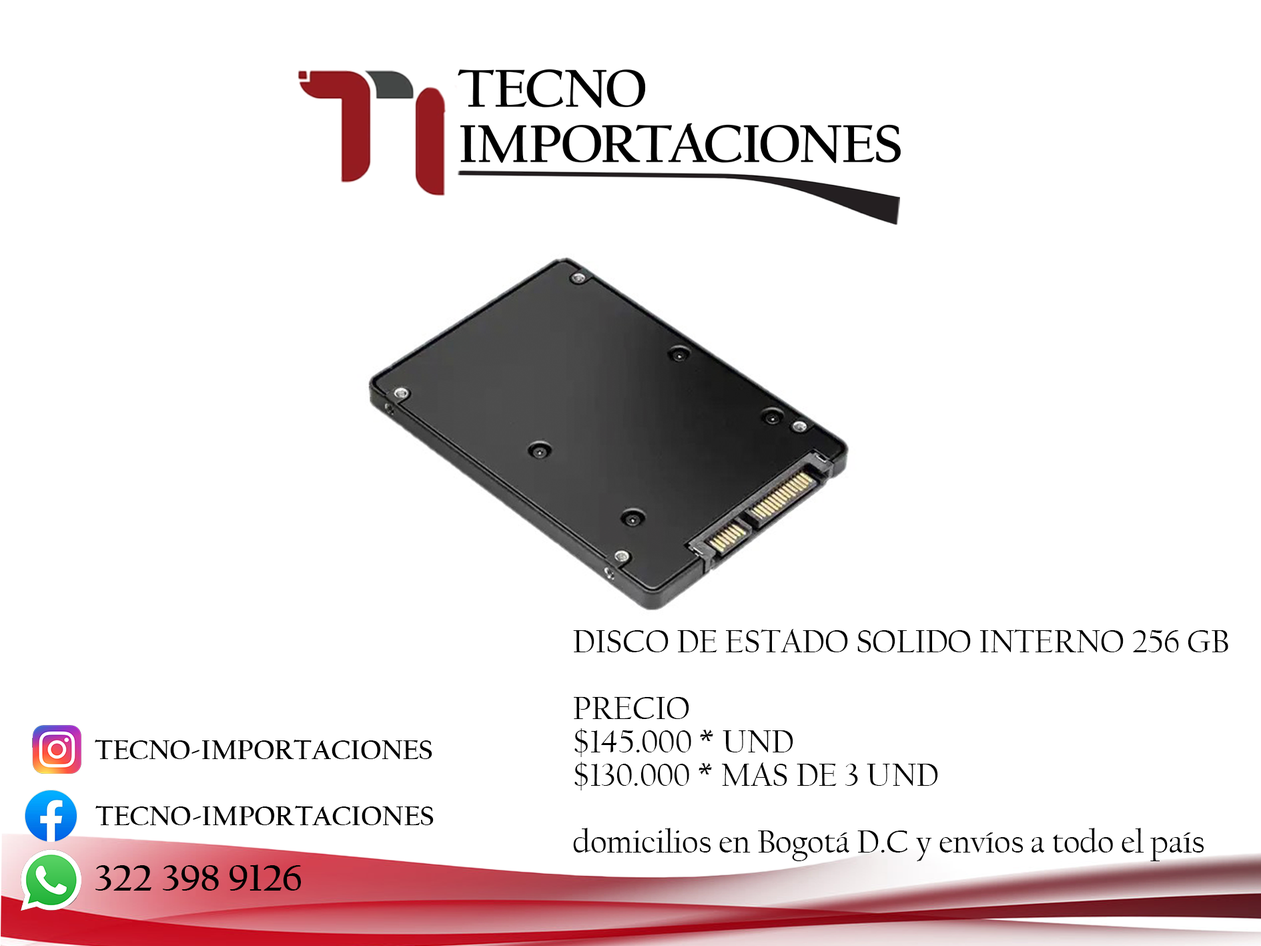
<style>
.page{position:relative;width:1261px;height:946px;background:#ffffff}
.page>*{position:absolute;margin:0}
.t1{font:33.4px/33.4px "CalifornianFB-Reg";letter-spacing:-0.005em;color:#000000}
.t2{font:27.8px "CalifornianFB-Bold";letter-spacing:-0.005em;color:#000000}
.t3{font:38.9px "CalifornianFB-Bold";letter-spacing:-0.005em;color:#000000}
</style>
<div class="page">
<p class="t1" style="left:573px;top:629px;width:655px;height:232px">DISCO DE ESTADO SOLIDO INTERNO 256 GB<br><br>PRECIO<br>$145.000 * UND<br>$130.000 * MAS DE 3 UND<br><br>domicilios en Bogotá D.C y envíos a todo el país</p>
<p class="t2" style="left:95px;top:739px;width:337px;height:20px">TECNO-IMPORTACIONES</p>
<p class="t2" style="left:95px;top:805px;width:339px;height:20px">TECNO-IMPORTACIONES</p>
<p class="t3" style="left:95px;top:864px;width:206px;height:26px">322 398 9126</p>
</div>
